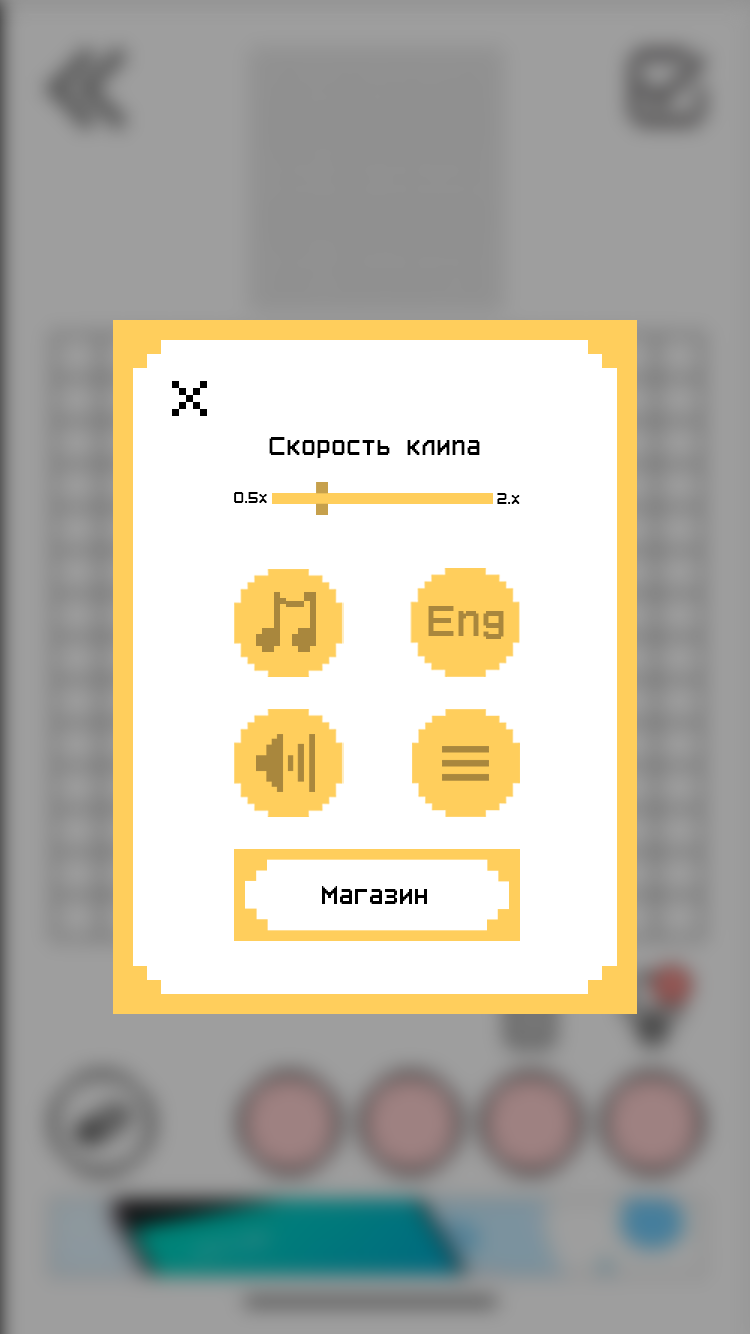
<style>
.page{position:relative;width:750px;height:1334px;background:#ffffff}
.page>*{position:absolute;margin:0}
.t1{font:30px "PixelFont-7";color:#000000}
.t2{font:18px "PixelFont-7";color:#000000}
</style>
<div class="page">
<p class="t1" style="left:269px;top:437px;width:211px;height:21px">Скорость клипа</p>
<p class="t2" style="left:234px;top:492px;width:33px;height:11px">0.5х</p>
<p class="t2" style="left:497px;top:493px;width:23px;height:11px">2.х</p>
<p class="t1" style="left:322px;top:886px;width:105px;height:18px">Магазин</p>
</div>
